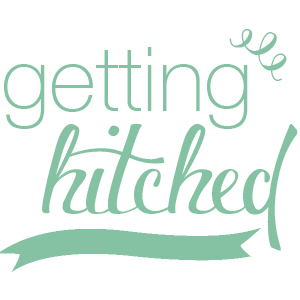
<style>
.page{position:relative;width:300px;height:300px;background:#ffffff}
.page>*{position:absolute;margin:0}
.t1{font:90px "BergamotOrnaments";color:#85c2a3}
.t2{font:90px "HelveticaNeue-Thin";color:#85c2a3}
.t3{font:90px "Voluptate_demo";color:#85c2a3}
</style>
<div class="page">
<p class="t1" style="left:229px;top:29px;width:58px;height:52px">&gt;</p>
<p class="t2" style="left:4px;top:47px;width:244px;height:82px">getting</p>
<p class="t3" style="left:42px;top:124px;width:256px;height:127px">hitched</p>
</div>
